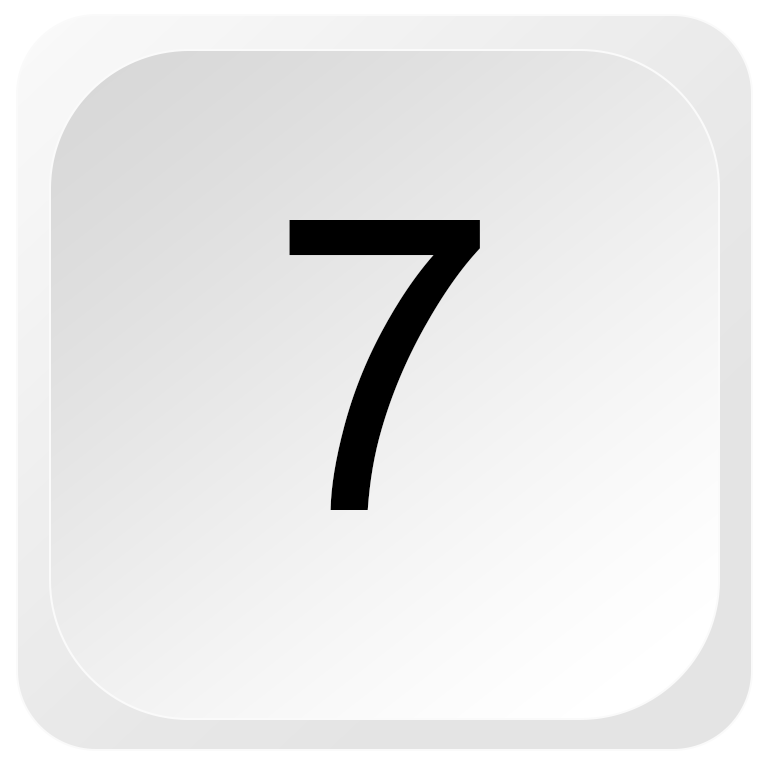
<style>
.page{position:relative;width:768px;height:768px}
.page>*{position:absolute;margin:0}
.t1{font:411px "ArialMT";color:#000000}
</style>
<div class="page">
<p class="t1" style="left:289px;top:220px;width:191px;height:290px">7</p>
</div>
